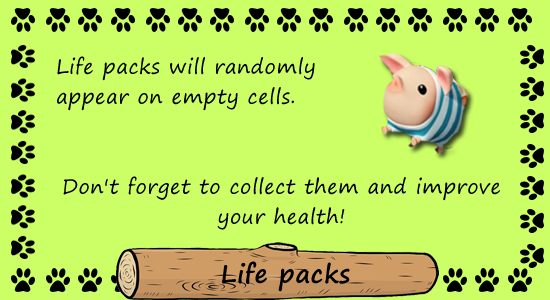
<style>
.page{position:relative;width:550px;height:300px;background:#ccff66}
.page>*{position:absolute;margin:0}
.t1{font:20px/30px "SegoePrint";letter-spacing:0.025em;color:#000000}
.t2{font:25px "SegoePrint-Bold";letter-spacing:0.025em;color:#000000}
</style>
<div class="page">
<p class="t1" style="left:57px;top:56px;width:443px;height:174px">Life packs will randomly <br>appear on empty cells.<br><br><br>Don't forget to collect them and improve your health!</p>
<p class="t2" style="left:222px;top:261px;width:128px;height:31px">Life packs</p>
</div>
